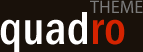
<style>
.page{position:relative;width:143px;height:52px;background:#19110a}
.page>*{position:absolute;margin:0}
.t1{font:18px "MyriadPro-Regular";letter-spacing:0.005em;color:#7b7b7b}
.t2{font:48px "FranklinGothic-MediumCond";letter-spacing:0.005em;color:#ffffff}
.t3{font:48px "FranklinGothic-MediumCond";letter-spacing:0.005em;color:#d52300}
</style>
<div class="page">
<p class="t1" style="left:90px;top:0px;width:53px;height:13px">THEME</p>
<p class="t2" style="left:0px;top:12px;width:125px;height:40px">quad<span class="t3">ro</span></p>
</div>
